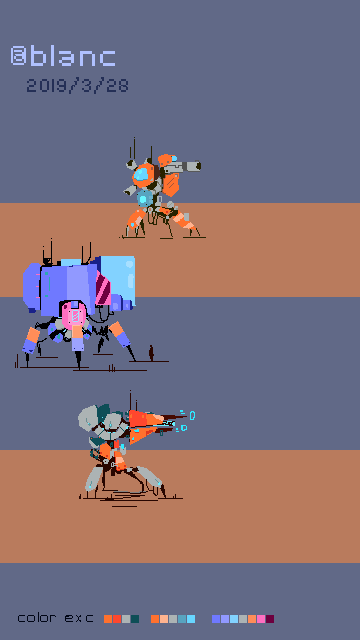
<style>
.page{position:relative;width:360px;height:640px;background:#616987}
.page>*{position:absolute;margin:0}
.t1{font:30px "SFPixelate";letter-spacing:-0.025em;color:#b0c1ff}
.t2{font:18px "SFPixelate";letter-spacing:-0.025em;color:#242f56}
.t3{font:14px "SFPixelate";letter-spacing:-0.025em;color:#000515}
</style>
<div class="page">
<p class="t1" style="left:11px;top:45px;width:104px;height:21px">@blanc</p>
<p class="t2" style="left:27px;top:77px;width:101px;height:17px">2019/3/28</p>
<p class="t3" style="left:18px;top:612px;width:75px;height:10px">color exc</p>
</div>
